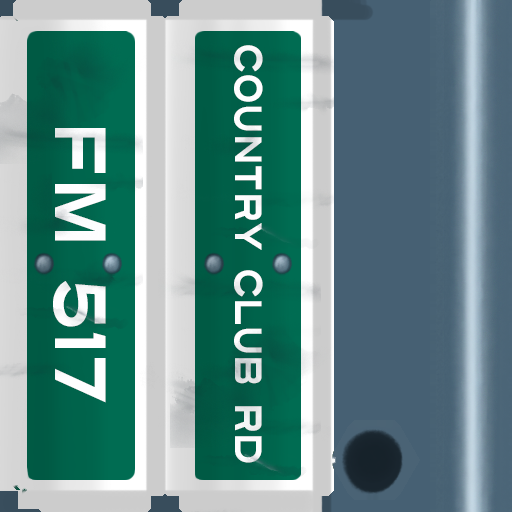
<style>
.page{position:relative;width:512px;height:512px}
.page>*{position:absolute;margin:0}
.t1{font:38px "Turnpike";color:#fefeff;scale:0.75 1}
.t2{font:72px "Turnpike";color:#fefeff;scale:0.75 1}
</style>
<div class="page">
<p class="t1" style="left:234px;top:45px;width:29px;height:418px;rotate:90deg">Country Club Rd</p>
<p class="t2" style="left:53px;top:128px;width:53px;height:275px;rotate:90deg">fm 517</p>
</div>
